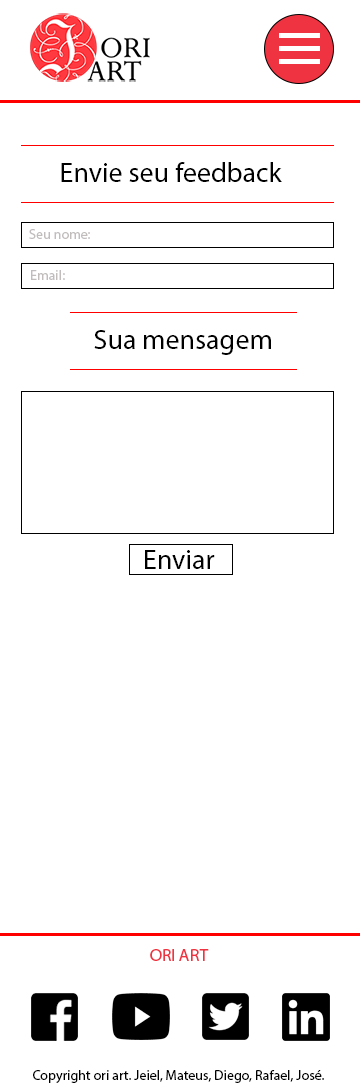
<style>
.page{position:relative;width:360px;height:1089px;background:#ffffff}
.page>*{position:absolute;margin:0}
.t1{font:28px "MyriadPro-Regular";color:#000000}
.t2{font:14px "MyriadPro-Regular";color:#c1bdbd}
</style>
<div class="page">
<p class="t1" style="left:61px;top:162px;width:221px;height:20px">Envie seu feedback</p>
<p class="t2" style="left:29px;top:229px;width:61px;height:10px">Seu nome:</p>
<p class="t2" style="left:31px;top:270px;width:34px;height:10px">Email:</p>
<p class="t1" style="left:94px;top:330px;width:177px;height:25px">Sua mensagem</p>
<p class="t1" style="left:145px;top:550px;width:70px;height:19px">Enviar</p>
</div>
